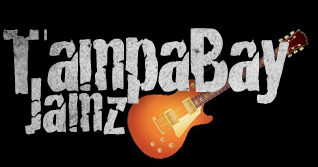
<style>
.page{position:relative;width:318px;height:167px;background:#000000}
.page>*{position:absolute;margin:0}
.t1{font:100px "Cracked";letter-spacing:-0.04em;color:#c6c6c6}
.t2{font:75px "Cracked";letter-spacing:-0.02em;color:#b7b7b7}
</style>
<div class="page">
<p class="t1" style="left:3px;top:28px;width:287px;height:76px">TampaBay</p>
<p class="t2" style="left:25px;top:77px;width:103px;height:58px">Jamz</p>
</div>
